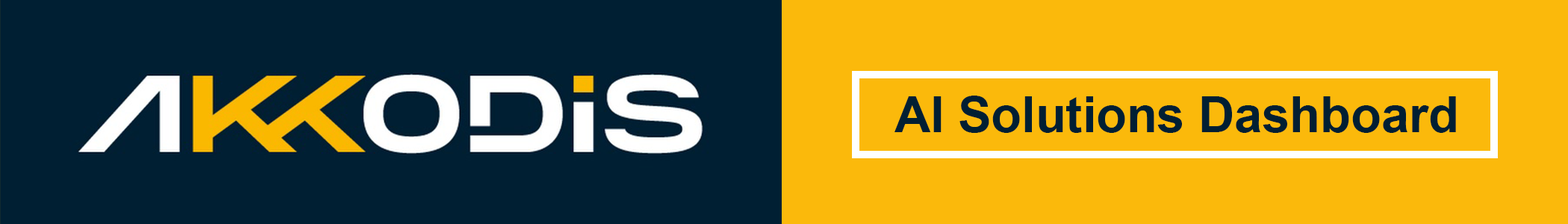
<style>
.page{position:relative;width:1568px;height:224px;background:#fbb90b}
.page>*{position:absolute;margin:0}
.t1{font:49.8px "Arial-BoldMT";color:#001f33}
</style>
<div class="page">
<p class="t1" style="left:895px;top:96px;width:561px;height:37px">AI Solutions Dashboard</p>
</div>
